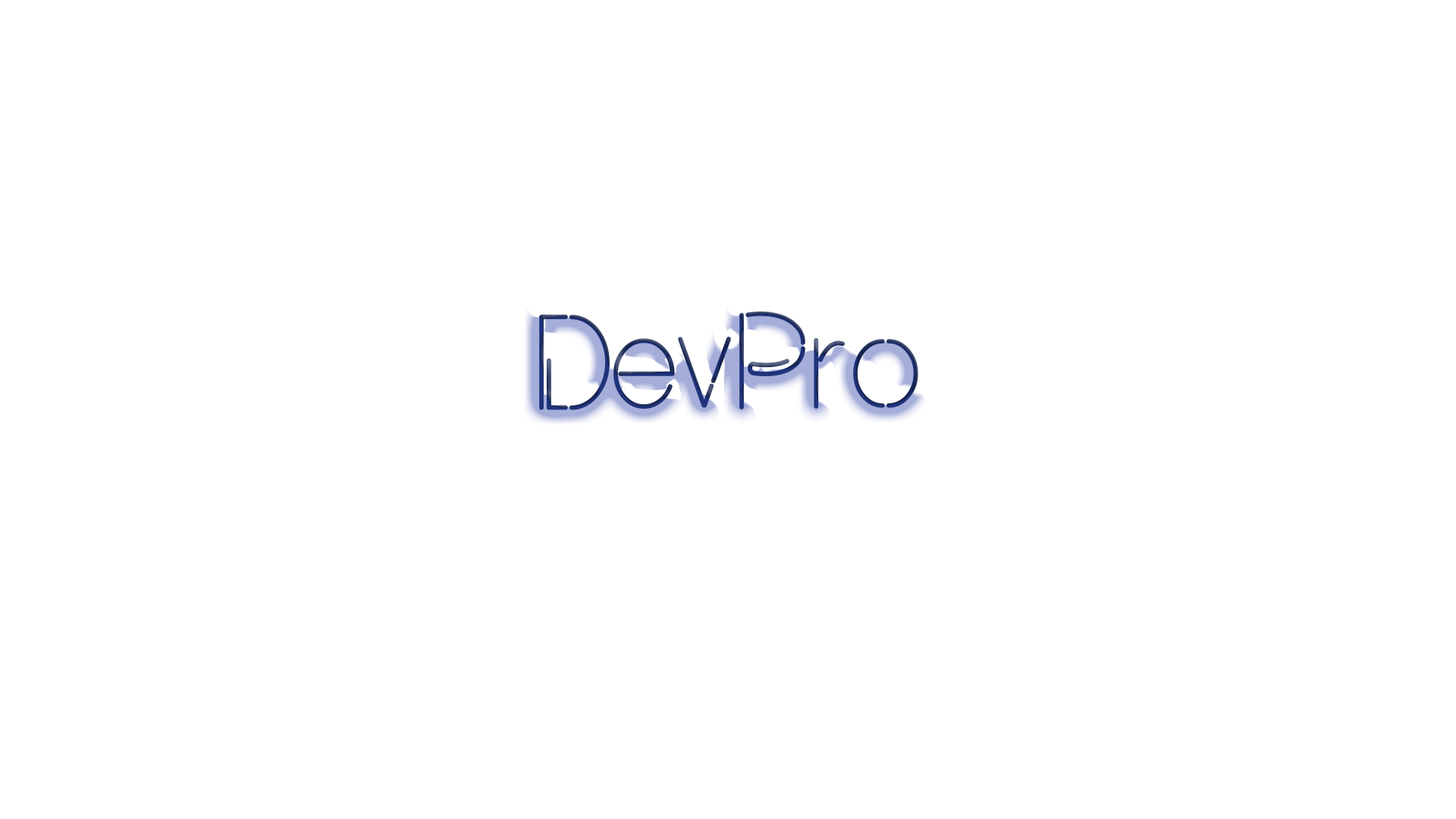
<style>
.page{position:relative;width:1456px;height:819px;background:#ffffff}
.page>*{position:absolute;margin:0}
.t1{font:113.7px "NEONABSOLUTESANS1Regular"}
</style>
<div class="page">
<p class="t1" style="left:539px;top:311px;width:379px;height:99px">DevPro</p>
</div>
